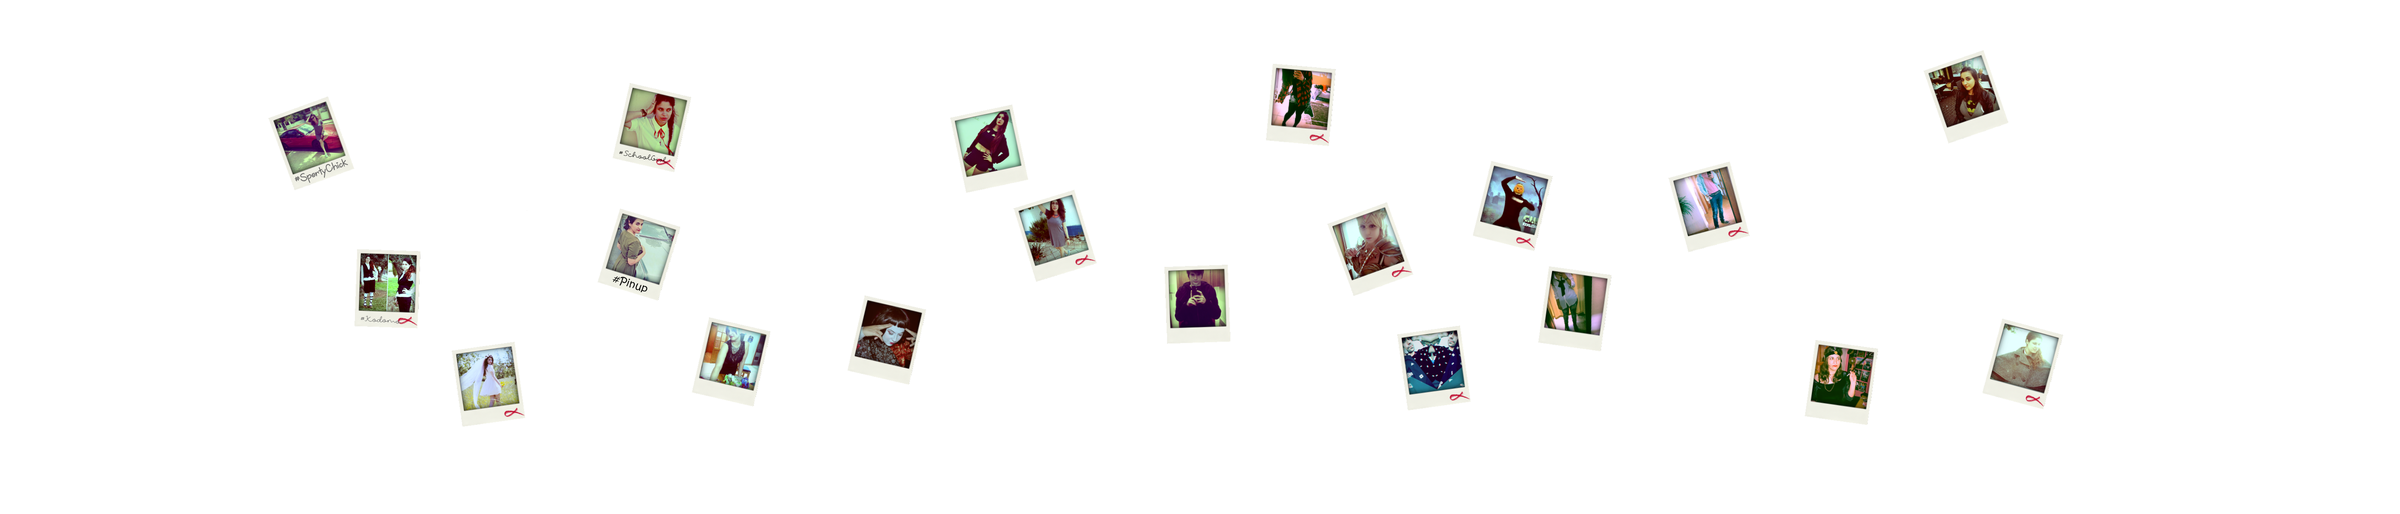
<style>
.page{position:relative;width:2400px;height:514px;background:#ffffff}
.page>*{position:absolute;margin:0}
.t1{font:10.3px "TooFreakinCuteDemo";color:#656565}
.t2{font:7.7px "foxinthesnow";color:#000000}
.t3{font:10.3px "KristenITC-Regular";color:#000000}
.t4{font:7.7px "foxinthesnow";color:#656565}
</style>
<div class="page">
<p class="t1" style="left:295px;top:159px;width:53px;height:24px;rotate:-20deg">SportyChick#</p>
<p class="t2" style="left:619px;top:150px;width:48px;height:13px;rotate:9deg">SchoolGirl#</p>
<p class="t3" style="left:612px;top:276px;width:36px;height:17px;rotate:18deg">Pinup#</p>
<p class="t4" style="left:360px;top:316px;width:41px;height:8px;rotate:4deg">Kodomo#</p>
</div>
